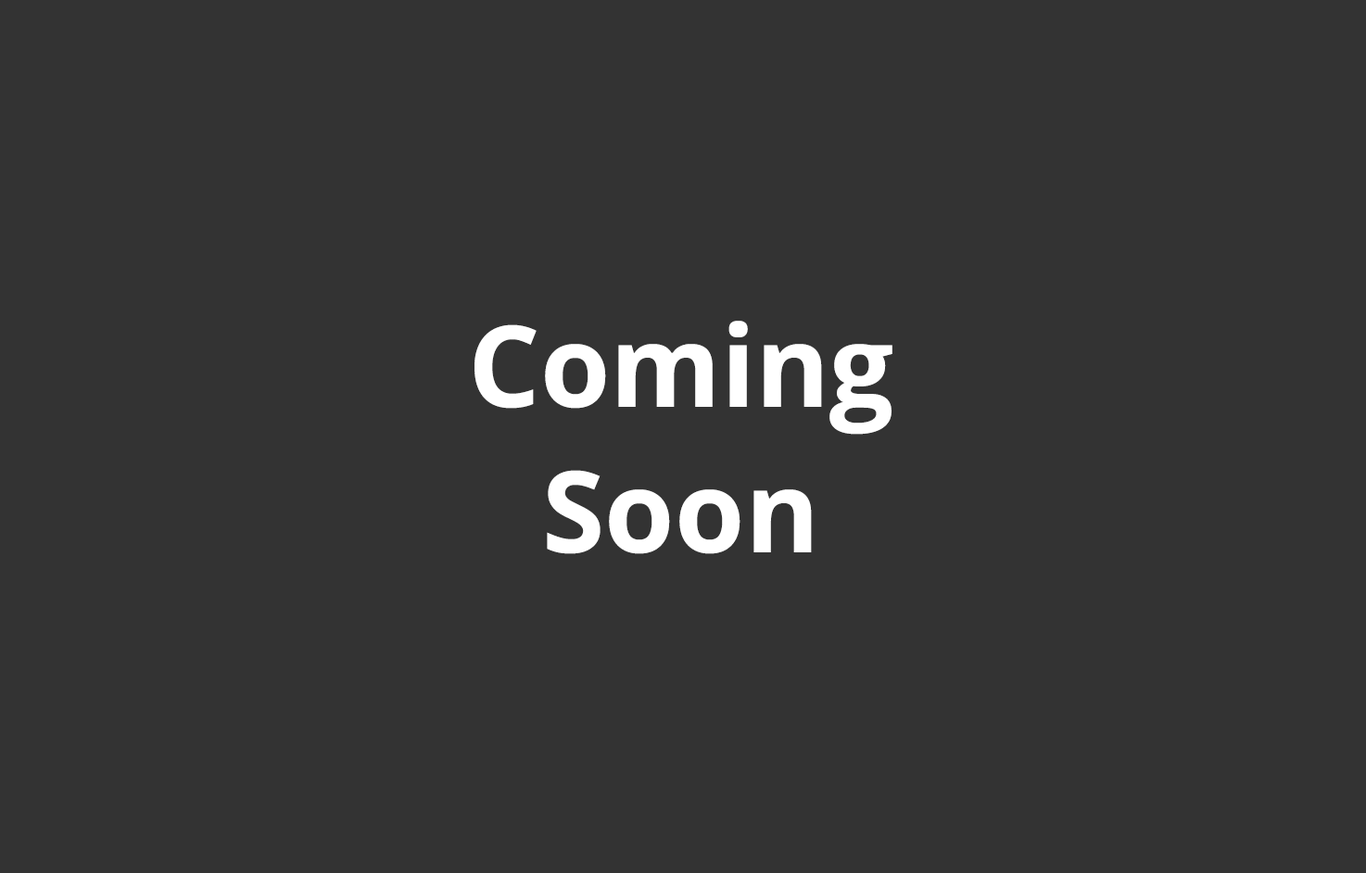
<style>
.page{position:relative;width:1366px;height:873px;background:#333333}
.page>*{position:absolute;margin:0}
.t1{font:113.1px "OpenSans-Bold";color:#ffffff}
</style>
<div class="page">
<p class="t1" style="left:474px;top:321px;width:418px;height:233px;text-align:center">Coming<br>Soon</p>
</div>
